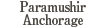
<style>
.page{position:relative;width:103px;height:27px;background:#ffffff}
.page>*{position:absolute;margin:0}
.t1{font:14px/13px "RyuminPro-ExBold";letter-spacing:-0.04em;color:#4c4843;scale:0.9 1}
</style>
<div class="page">
<p class="t1" style="left:19px;top:1px;width:67px;height:26px;text-align:center">Paramushir<br>Anchorage</p>
</div>
